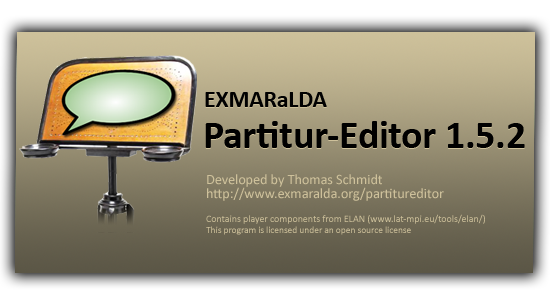
<style>
.page{position:relative;width:550px;height:300px}
.page>*{position:absolute;margin:0}
.t1{font:23.8px "Calibri-Bold";letter-spacing:-0.005em;color:#010101}
.t2{font:39.6px "Calibri-Bold";letter-spacing:-0.005em;color:#000000}
.t3{font:14.3px/14px "Calibri";letter-spacing:-0.005em;color:#cec19b}
.t4{font:10px "Calibri";letter-spacing:-0.005em;color:#cec19b}
.t5{font:9.5px "Calibri";letter-spacing:-0.005em;color:#cec19b}
</style>
<div class="page">
<p class="t1" style="left:205px;top:93px;width:122px;height:15px">EXMARaLDA</p>
<p class="t1" style="left:205px;top:92px;width:122px;height:15px">EXMARaLDA</p>
<p class="t2" style="left:205px;top:122px;width:320px;height:27px">Partitur-Editor 1.5.2</p>
<p class="t2" style="left:205px;top:121px;width:320px;height:27px">Partitur-Editor 1.5.2</p>
<p class="t3" style="left:206px;top:174px;width:279px;height:61px">Developed by Thomas Schmidt<br>http://www.exmaralda.org/partitureditor<br><span class="t4"><br>Contains player components from ELAN (www.lat-mpi.eu/tools/elan/)<br></span><span class="t5">This program is licensed under an open source license</span></p>
</div>
